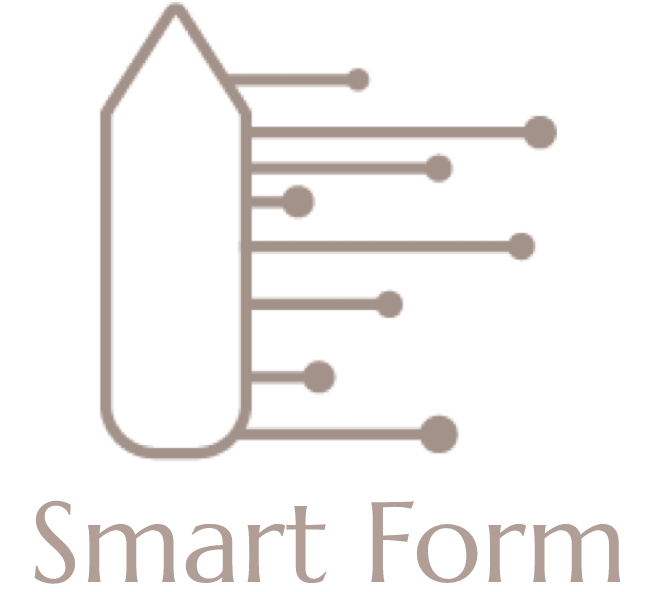
<style>
.page{position:relative;width:656px;height:592px;background:#ffffff}
.page>*{position:absolute;margin:0}
.t1{font:114px "Marcellus-Regular";color:#b19f97}
</style>
<div class="page">
<p class="t1" style="left:34px;top:500px;width:587px;height:84px">Smart Form</p>
</div>
